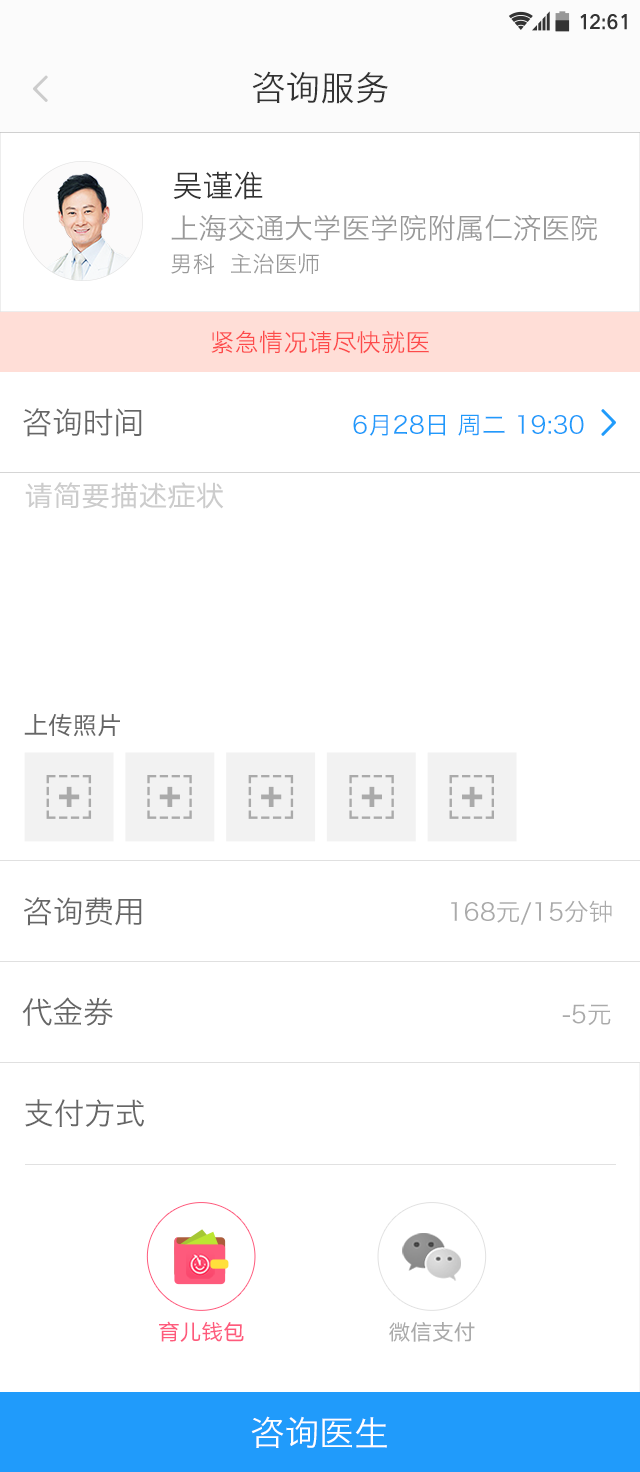
<style>
.page{position:relative;width:640px;height:1472px;background:#ffffff}
.page>*{position:absolute;margin:0}
.t1{font:20.7px "HYQiHei-FEJ";color:#333333}
.t2{font:34.7px "HiraginoSansGB-W3";color:#333333}
.t3{font:30.6px "HiraginoSansGB-W3";color:#333333}
.t4{font:28.6px/32px "HiraginoSansGB-W3";color:#999999}
.t5{font:22.4px/33.5px "HiraginoSansGB-W3";color:#999999}
.t6{font:24.5px "HiraginoSansGB-W3";color:#fd4a4a}
.t7{font:24.5px "HiraginoSansGB-W3";color:#209bfb}
.t8{font:30.6px "HiraginoSansGB-W3";color:#666666}
.t9{font:28.6px "HYQiHei-EEJ";color:#cccccc}
.t10{font:24.5px "HYQiHei-EEJ";color:#666666}
.t11{font:24.5px "HiraginoSansGB-W3";color:#aaaaaa}
.t12{font:21.8px "HYQiHei-EEJ";color:#fe5a7c}
.t13{font:21.8px "HYQiHei-EEJ";color:#aaaaaa}
.t14{font:34.7px "HiraginoSansGB-W3";color:#ffffff}
</style>
<div class="page">
<p class="t1" style="left:580px;top:14px;width:47px;height:16px">12:61</p>
<p class="t2" style="left:252px;top:71px;width:136px;height:33px">咨询服务</p>
<p class="t3" style="left:173px;top:171px;width:90px;height:29px">吴谨准</p>
<p class="t4" style="left:171px;top:214px;width:426px;height:60px">上海交通大学医学院附属仁济医院<br><span class="t5">男科  主治医师</span></p>
<p class="t6" style="left:211px;top:330px;width:218px;height:24px">紧急情况请尽快就医</p>
<p class="t7" style="left:23px;top:408px;width:561px;height:29px"><span class="t8">咨询时间                      </span>6月28日 周二 19:30</p>
<p class="t9" style="left:25px;top:482px;width:199px;height:27px">请简要描述症状</p>
<p class="t10" style="left:24px;top:713px;width:96px;height:24px">上传照片</p>
<p class="t8" style="left:24px;top:897px;width:118px;height:29px">咨询费用</p>
<p class="t11" style="left:451px;top:900px;width:161px;height:25px">168元/15分钟</p>
<p class="t8" style="left:22px;top:997px;width:589px;height:29px">代金券                                            <span class="t11">-5元</span></p>
<p class="t8" style="left:25px;top:1099px;width:119px;height:28px">支付方式</p>
<p class="t12" style="left:159px;top:1321px;width:85px;height:21px">育儿钱包</p>
<p class="t13" style="left:389px;top:1322px;width:86px;height:20px">微信支付</p>
<p class="t14" style="left:251px;top:1416px;width:136px;height:32px">咨询医生</p>
</div>
